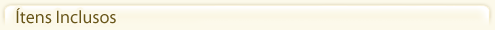
<style>
.page{position:relative;width:495px;height:30px;background:#fcf9ea}
.page>*{position:absolute;margin:0}
.t1{font:18px "MyriadPro-Regular";color:#685518}
</style>
<div class="page">
<p class="t1" style="left:16px;top:8px;width:100px;height:16px">Ítens Inclusos</p>
</div>
